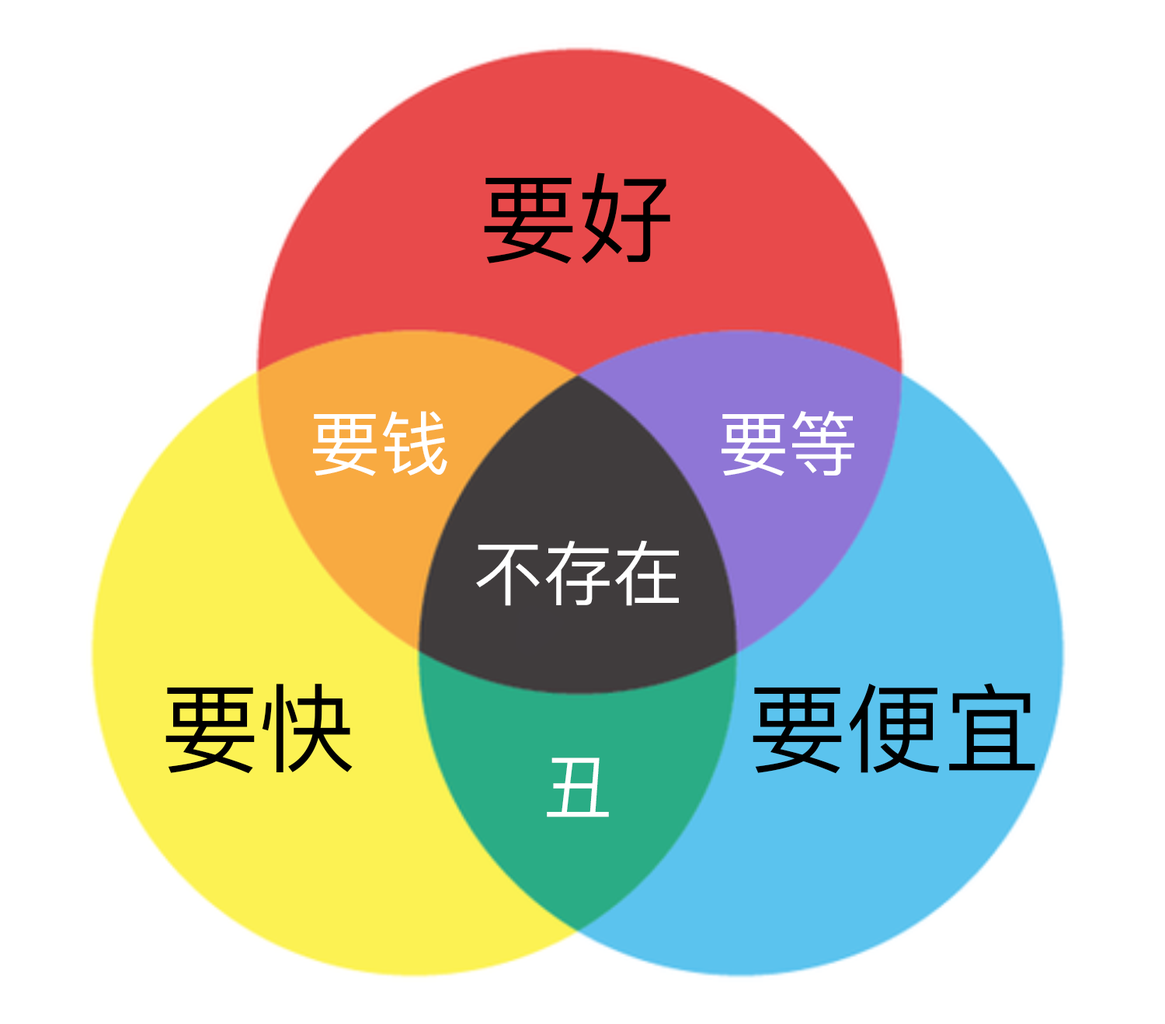
<style>
.page{position:relative;width:1165px;height:1024px;background:#ffffff}
.page>*{position:absolute;margin:0}
.t1{font:97.1px "PingFangSC-Regular";color:#000000}
.t2{font:69.9px "PingFangSC-Regular";color:#ffffff}
</style>
<div class="page">
<p class="t1" style="left:484px;top:172px;width:186px;height:92px">要好</p>
<p class="t2" style="left:313px;top:411px;width:134px;height:65px">要钱</p>
<p class="t2" style="left:721px;top:411px;width:133px;height:65px">要等</p>
<p class="t2" style="left:476px;top:540px;width:203px;height:66px">不存在</p>
<p class="t1" style="left:165px;top:683px;width:188px;height:91px">要快</p>
<p class="t1" style="left:753px;top:683px;width:282px;height:91px">要便宜</p>
<p class="t2" style="left:547px;top:757px;width:62px;height:60px">丑</p>
</div>
